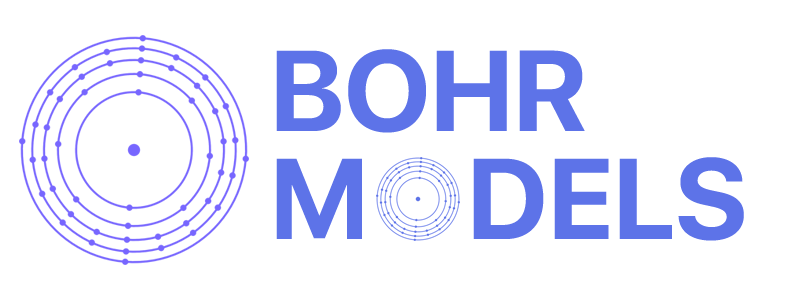
<style>
.page{position:relative;width:800px;height:300px;background:#ffffff}
.page>*{position:absolute;margin:0}
.t1{font:114.1px/107.7px "SFUIDisplay-Bold";color:#5d73e8}
</style>
<div class="page">
<p class="t1" style="left:276px;top:49px;width:468px;height:192px">BOHR<br>M    DELS</p>
</div>
